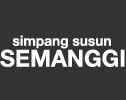
<style>
.page{position:relative;width:126px;height:100px;background:#333333}
.page>*{position:absolute;margin:0}
.t1{font:14px "HelveticaNeue-Bold";color:#ffffff}
.t2{font:23.2px "HelveticaNeue-Bold";color:#ffffff}
</style>
<div class="page">
<p class="t1" style="left:12px;top:35px;width:99px;height:14px">simpang susun</p>
<p class="t2" style="left:0px;top:49px;width:125px;height:18px">SEMANGGI</p>
</div>
